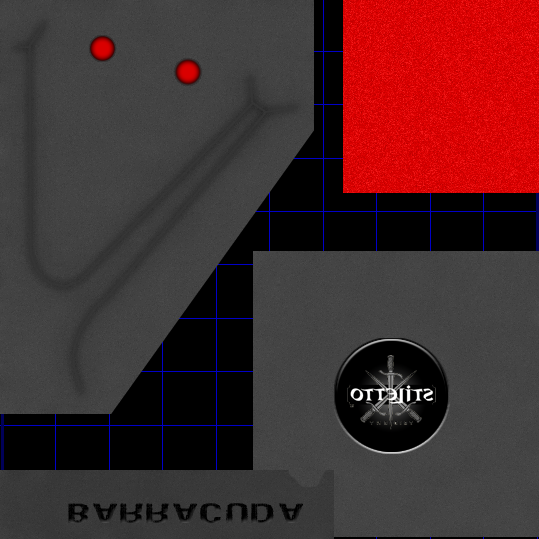
<style>
.page{position:relative;width:539px;height:539px}
.page>*{position:absolute;margin:0}
.t1{font:30.1px "New";color:#000000;scale:1.19 1}
</style>
<div class="page">
<p class="t1" style="left:68px;top:503px;width:236px;height:21px">BARRACUDA</p>
</div>
